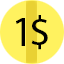
<style>
.page{position:relative;width:64px;height:64px;background:#fff25f}
.page>*{position:absolute;margin:0}
.t1{font:42.3px "MyriadPro-Regular";color:#000000}
</style>
<div class="page">
<p class="t1" style="left:16px;top:15px;width:32px;height:35px">1$</p>
</div>
